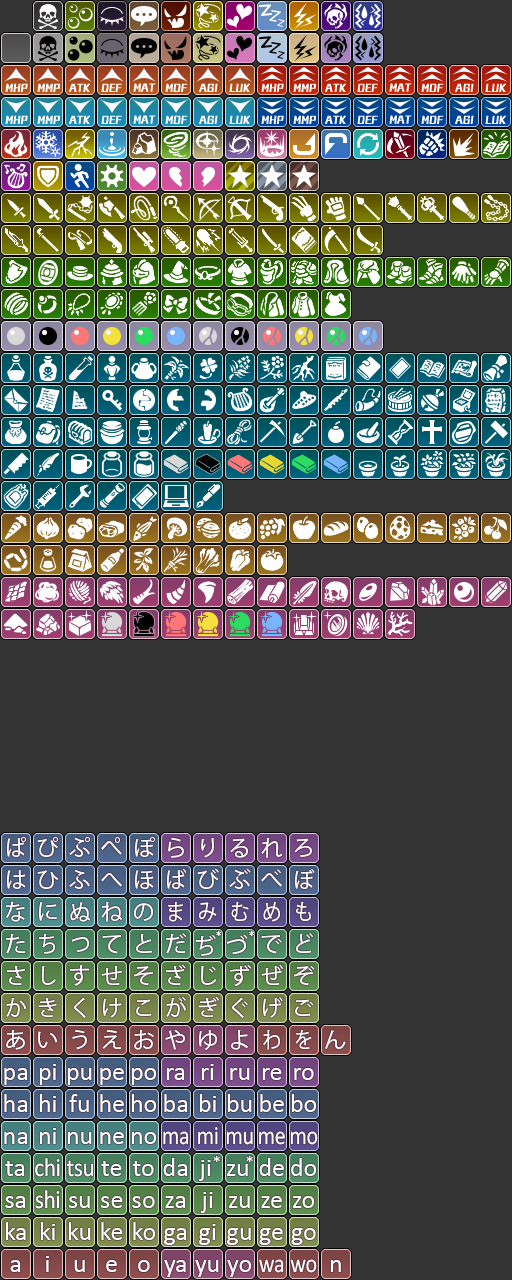
<style>
.page{position:relative;width:512px;height:1280px;background:#333333}
.page>*{position:absolute;margin:0}
.t1{font:22px "KozGoPr6N-Regular";color:#ffffff}
.t2{font:22px "KozGoPr6N-Regular";letter-spacing:-0.02em;color:#ffffff;scale:0.85 1}
.t3{font:22px "KozGoPr6N-Regular";letter-spacing:-0.02em;color:#ffffff;scale:0.9 1}
.t4{font:14px "Calibri";color:#ffffff}
.t5{font:26px "Calibri";color:#ffffff}
.t6{font:26px "Calibri";letter-spacing:-0.02em;color:#ffffff;scale:0.85 1}
.t7{font:26px "Calibri";letter-spacing:-0.02em;color:#ffffff;scale:0.9 1}
.t8{font:18px "Calibri";color:#ffffff}
</style>
<div class="page">
<p class="t1" style="left:7px;top:837px;width:19px;height:20px">ぱ</p>
<p class="t1" style="left:37px;top:837px;width:21px;height:20px">ぴ</p>
<p class="t1" style="left:69px;top:837px;width:21px;height:20px">ぷ</p>
<p class="t1" style="left:101px;top:837px;width:21px;height:18px">ぺ</p>
<p class="t1" style="left:135px;top:837px;width:20px;height:20px">ぽ</p>
<p class="t1" style="left:167px;top:838px;width:17px;height:20px">ら</p>
<p class="t1" style="left:201px;top:838px;width:13px;height:20px">り</p>
<p class="t1" style="left:230px;top:838px;width:18px;height:20px">る</p>
<p class="t1" style="left:261px;top:837px;width:22px;height:21px">れ</p>
<p class="t1" style="left:294px;top:838px;width:18px;height:19px">ろ</p>
<p class="t1" style="left:7px;top:870px;width:19px;height:19px">は</p>
<p class="t1" style="left:37px;top:870px;width:22px;height:19px">ひ</p>
<p class="t1" style="left:69px;top:869px;width:21px;height:20px">ふ</p>
<p class="t1" style="left:135px;top:870px;width:19px;height:19px">ほ</p>
<p class="t1" style="left:167px;top:868px;width:20px;height:21px">ば</p>
<p class="t1" style="left:197px;top:868px;width:22px;height:21px">び</p>
<p class="t1" style="left:229px;top:868px;width:22px;height:21px">ぶ</p>
<p class="t1" style="left:261px;top:869px;width:21px;height:18px">べ</p>
<p class="t1" style="left:295px;top:869px;width:20px;height:20px">ぼ</p>
<p class="t1" style="left:101px;top:873px;width:21px;height:14px">へ</p>
<p class="t1" style="left:6px;top:901px;width:19px;height:21px">な</p>
<p class="t1" style="left:39px;top:902px;width:18px;height:19px">に</p>
<p class="t1" style="left:70px;top:902px;width:20px;height:20px">ぬ</p>
<p class="t1" style="left:101px;top:901px;width:21px;height:21px">ね</p>
<p class="t1" style="left:134px;top:903px;width:19px;height:18px">の</p>
<p class="t2" style="left:168px;top:902px;width:15px;height:20px">ま</p>
<p class="t2" style="left:199px;top:902px;width:18px;height:20px">み</p>
<p class="t2" style="left:231px;top:901px;width:18px;height:20px">む</p>
<p class="t2" style="left:263px;top:901px;width:17px;height:21px">め</p>
<p class="t2" style="left:296px;top:901px;width:15px;height:20px">も</p>
<p class="t1" style="left:6px;top:933px;width:20px;height:21px">た</p>
<p class="t3" style="left:39px;top:933px;width:16px;height:21px">ち</p>
<p class="t3" style="left:71px;top:937px;width:18px;height:15px">つ</p>
<p class="t1" style="left:102px;top:935px;width:19px;height:19px">て</p>
<p class="t1" style="left:136px;top:933px;width:16px;height:20px">と</p>
<p class="t1" style="left:166px;top:933px;width:21px;height:21px">だ</p>
<p class="t1" style="left:195px;top:935px;width:21px;height:21px">ぢ</p>
<p class="t4" style="left:216px;top:931px;width:6px;height:5px">*</p>
<p class="t1" style="left:226px;top:934px;width:22px;height:21px">づ</p>
<p class="t4" style="left:249px;top:931px;width:6px;height:5px">*</p>
<p class="t1" style="left:261px;top:935px;width:21px;height:19px">で</p>
<p class="t1" style="left:296px;top:933px;width:17px;height:20px">ど</p>
<p class="t1" style="left:7px;top:966px;width:19px;height:19px">さ</p>
<p class="t3" style="left:42px;top:966px;width:14px;height:19px">し</p>
<p class="t1" style="left:70px;top:965px;width:20px;height:21px">す</p>
<p class="t1" style="left:101px;top:966px;width:21px;height:19px">せ</p>
<p class="t1" style="left:134px;top:966px;width:19px;height:20px">そ</p>
<p class="t1" style="left:166px;top:964px;width:20px;height:21px">ざ</p>
<p class="t1" style="left:201px;top:966px;width:16px;height:19px">じ</p>
<p class="t1" style="left:230px;top:964px;width:21px;height:22px">ず</p>
<p class="t1" style="left:261px;top:965px;width:22px;height:20px">ぜ</p>
<p class="t1" style="left:294px;top:966px;width:21px;height:20px">ぞ</p>
<p class="t1" style="left:6px;top:998px;width:21px;height:19px">か</p>
<p class="t1" style="left:38px;top:998px;width:19px;height:19px">き</p>
<p class="t1" style="left:74px;top:997px;width:12px;height:21px">く</p>
<p class="t1" style="left:103px;top:998px;width:19px;height:20px">け</p>
<p class="t1" style="left:136px;top:999px;width:16px;height:17px">こ</p>
<p class="t1" style="left:166px;top:997px;width:20px;height:20px">が</p>
<p class="t1" style="left:198px;top:996px;width:21px;height:21px">ぎ</p>
<p class="t1" style="left:232px;top:997px;width:16px;height:21px">ぐ</p>
<p class="t1" style="left:263px;top:997px;width:20px;height:21px">げ</p>
<p class="t1" style="left:295px;top:999px;width:19px;height:17px">ご</p>
<p class="t1" style="left:6px;top:1030px;width:19px;height:20px">あ</p>
<p class="t1" style="left:38px;top:1031px;width:20px;height:17px">い</p>
<p class="t1" style="left:72px;top:1030px;width:15px;height:20px">う</p>
<p class="t1" style="left:102px;top:1030px;width:19px;height:19px">え</p>
<p class="t1" style="left:134px;top:1030px;width:20px;height:20px">お</p>
<p class="t1" style="left:165px;top:1029px;width:20px;height:21px">や</p>
<p class="t1" style="left:199px;top:1030px;width:18px;height:20px">ゆ</p>
<p class="t1" style="left:231px;top:1030px;width:17px;height:20px">よ</p>
<p class="t2" style="left:263px;top:1029px;width:17px;height:21px">わ</p>
<p class="t2" style="left:295px;top:1029px;width:17px;height:20px">を</p>
<p class="t1" style="left:325px;top:1030px;width:21px;height:19px">ん</p>
<p class="t5" style="left:4px;top:1068px;width:24px;height:17px">pa</p>
<p class="t5" style="left:39px;top:1064px;width:17px;height:21px">pi</p>
<p class="t5" style="left:67px;top:1068px;width:25px;height:17px">pu</p>
<p class="t5" style="left:100px;top:1068px;width:24px;height:17px">pe</p>
<p class="t5" style="left:131px;top:1068px;width:26px;height:17px">po</p>
<p class="t5" style="left:166px;top:1068px;width:19px;height:12px">ra</p>
<p class="t5" style="left:201px;top:1064px;width:13px;height:16px">ri</p>
<p class="t5" style="left:230px;top:1068px;width:20px;height:12px">ru</p>
<p class="t5" style="left:262px;top:1068px;width:20px;height:12px">re</p>
<p class="t5" style="left:294px;top:1068px;width:20px;height:12px">ro</p>
<p class="t5" style="left:4px;top:1094px;width:24px;height:18px">ha</p>
<p class="t5" style="left:39px;top:1094px;width:17px;height:18px">hi</p>
<p class="t5" style="left:69px;top:1094px;width:20px;height:18px">fu</p>
<p class="t5" style="left:100px;top:1094px;width:24px;height:18px">he</p>
<p class="t5" style="left:131px;top:1094px;width:26px;height:18px">ho</p>
<p class="t5" style="left:164px;top:1094px;width:24px;height:18px">ba</p>
<p class="t5" style="left:199px;top:1094px;width:17px;height:18px">bi</p>
<p class="t5" style="left:227px;top:1094px;width:25px;height:18px">bu</p>
<p class="t5" style="left:260px;top:1094px;width:24px;height:18px">be</p>
<p class="t5" style="left:291px;top:1094px;width:26px;height:18px">bo</p>
<p class="t5" style="left:4px;top:1132px;width:24px;height:12px">na</p>
<p class="t5" style="left:39px;top:1128px;width:17px;height:16px">ni</p>
<p class="t5" style="left:67px;top:1132px;width:25px;height:12px">nu</p>
<p class="t5" style="left:100px;top:1132px;width:24px;height:12px">ne</p>
<p class="t5" style="left:131px;top:1132px;width:26px;height:12px">no</p>
<p class="t6" style="left:163px;top:1131px;width:26px;height:14px">ma</p>
<p class="t6" style="left:198px;top:1127px;width:20px;height:18px">mi</p>
<p class="t6" style="left:226px;top:1131px;width:27px;height:14px">mu</p>
<p class="t6" style="left:259px;top:1131px;width:26px;height:14px">me</p>
<p class="t6" style="left:290px;top:1131px;width:28px;height:14px">mo</p>
<p class="t7" style="left:35px;top:1158px;width:25px;height:19px">chi</p>
<p class="t5" style="left:163px;top:1158px;width:25px;height:18px">da</p>
<p class="t8" style="left:213px;top:1156px;width:7px;height:6px">*</p>
<p class="t8" style="left:246px;top:1156px;width:7px;height:6px">*</p>
<p class="t5" style="left:259px;top:1158px;width:25px;height:18px">de</p>
<p class="t5" style="left:291px;top:1158px;width:26px;height:18px">do</p>
<p class="t5" style="left:5px;top:1161px;width:20px;height:15px">ta</p>
<p class="t7" style="left:66px;top:1160px;width:28px;height:17px">tsu</p>
<p class="t5" style="left:101px;top:1161px;width:21px;height:15px">te</p>
<p class="t5" style="left:132px;top:1161px;width:22px;height:15px">to</p>
<p class="t5" style="left:198px;top:1160px;width:13px;height:21px">ji</p>
<p class="t5" style="left:227px;top:1164px;width:21px;height:12px">zu</p>
<p class="t7" style="left:35px;top:1190px;width:25px;height:19px">shi</p>
<p class="t5" style="left:200px;top:1192px;width:13px;height:21px">ji</p>
<p class="t5" style="left:5px;top:1196px;width:21px;height:12px">sa</p>
<p class="t5" style="left:69px;top:1196px;width:21px;height:12px">su</p>
<p class="t5" style="left:101px;top:1196px;width:22px;height:12px">se</p>
<p class="t5" style="left:132px;top:1196px;width:23px;height:12px">so</p>
<p class="t5" style="left:165px;top:1196px;width:21px;height:12px">za</p>
<p class="t5" style="left:229px;top:1196px;width:21px;height:12px">zu</p>
<p class="t5" style="left:261px;top:1196px;width:21px;height:12px">ze</p>
<p class="t5" style="left:293px;top:1196px;width:22px;height:12px">zo</p>
<p class="t5" style="left:5px;top:1222px;width:21px;height:18px">ka</p>
<p class="t5" style="left:40px;top:1222px;width:15px;height:18px">ki</p>
<p class="t5" style="left:68px;top:1222px;width:23px;height:18px">ku</p>
<p class="t5" style="left:101px;top:1222px;width:22px;height:18px">ke</p>
<p class="t5" style="left:133px;top:1222px;width:23px;height:18px">ko</p>
<p class="t5" style="left:164px;top:1228px;width:23px;height:17px">ga</p>
<p class="t5" style="left:199px;top:1224px;width:17px;height:21px">gi</p>
<p class="t5" style="left:227px;top:1228px;width:24px;height:17px">gu</p>
<p class="t5" style="left:259px;top:1228px;width:24px;height:17px">ge</p>
<p class="t5" style="left:291px;top:1228px;width:25px;height:17px">go</p>
<p class="t5" style="left:10px;top:1260px;width:11px;height:12px">a</p>
<p class="t5" style="left:46px;top:1256px;width:3px;height:16px">i</p>
<p class="t5" style="left:74px;top:1260px;width:11px;height:12px">u</p>
<p class="t5" style="left:106px;top:1260px;width:11px;height:12px">e</p>
<p class="t5" style="left:138px;top:1260px;width:12px;height:12px">o</p>
<p class="t5" style="left:164px;top:1260px;width:22px;height:17px">ya</p>
<p class="t5" style="left:195px;top:1260px;width:24px;height:17px">yu</p>
<p class="t5" style="left:227px;top:1260px;width:25px;height:17px">yo</p>
<p class="t6" style="left:259px;top:1259px;width:25px;height:14px">wa</p>
<p class="t6" style="left:290px;top:1259px;width:27px;height:14px">wo</p>
<p class="t5" style="left:330px;top:1260px;width:11px;height:12px">n</p>
</div>
